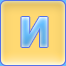
<style>
.page{position:relative;width:66px;height:66px}
.page>*{position:absolute;margin:0}
.t1{font:41px "Tahoma-Bold"}
</style>
<div class="page">
<p class="t1" style="left:21px;top:17px;width:27px;height:30px">И</p>
<p class="t1" style="left:21px;top:17px;width:27px;height:30px">И</p>
</div>
